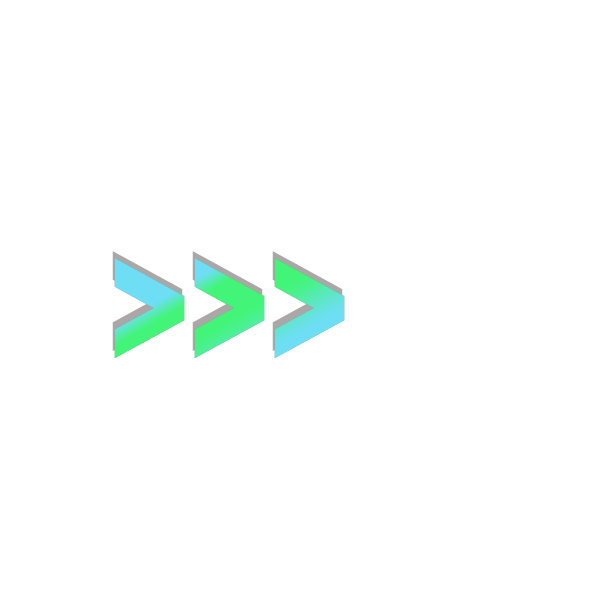
<style>
.page{position:relative;width:600px;height:600px;background:#ffffff}
.page>*{position:absolute;margin:0}
.t1{font:160px "Bauhaus93"}
</style>
<div class="page">
<p class="t1" style="left:112px;top:251px;width:231px;height:100px">&gt;&gt;&gt;</p>
<p class="t1" style="left:114px;top:258px;width:231px;height:100px">&gt;&gt;&gt;</p>
</div>
